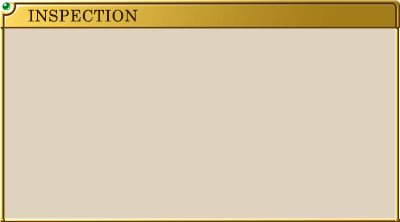
<style>
.page{position:relative;width:400px;height:222px;background:#dfd3c0}
.page>*{position:absolute;margin:0}
.t1{font:16px "CenturySchoolbook";letter-spacing:0.025em;color:#321a02}
</style>
<div class="page">
<p class="t1" style="left:28px;top:9px;width:110px;height:13px">INSPECTION</p>
</div>
